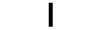
<style>
.page{position:relative;width:100px;height:30px;background:#ffffff}
.page>*{position:absolute;margin:0}
.t1{font:24px "SegoeUIBlack-Italic";color:#000000}
</style>
<div class="page">
<p class="t1" style="left:48px;top:2px;width:5px;height:25px">|</p>
</div>
